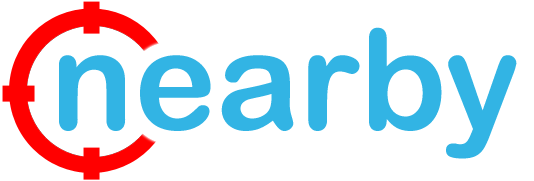
<style>
.page{position:relative;width:534px;height:181px;background:#ffffff}
.page>*{position:absolute;margin:0}
.t1{font:138.9px "ArialRoundedMTBold";color:#32b4e4}
</style>
<div class="page">
<p class="t1" style="left:59px;top:27px;width:458px;height:132px">nearby</p>
</div>
